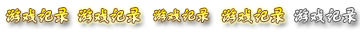
<style>
.page{position:relative;width:360px;height:32px;background:#ffffff}
.page>*{position:absolute;margin:0}
.t1{font:18px "FZSTK--GBK1-0";letter-spacing:-0.14em;font-weight:bold}
.t2{font:16px "FZSTK--GBK1-0";letter-spacing:-0.14em;font-weight:bold}
.t3{font:18px "FZSTK--GBK1-0";letter-spacing:-0.14em;color:#f1f1f1;font-weight:bold}
</style>
<div class="page">
<p class="t1" style="left:6px;top:8px;width:62px;height:15px">游戏记录</p>
<p class="t1" style="left:78px;top:8px;width:62px;height:15px">游戏记录</p>
<p class="t2" style="left:153px;top:8px;width:56px;height:14px">游戏记录</p>
<p class="t1" style="left:222px;top:8px;width:62px;height:15px">游戏记录</p>
<p class="t3" style="left:294px;top:8px;width:62px;height:15px">游戏记录</p>
</div>
